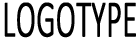
<style>
.page{position:relative;width:140px;height:40px;background:#ffffff}
.page>*{position:absolute;margin:0}
.t1{font:52.5px "Calibri-Light";color:#000000;font-weight:bold;scale:0.57 1}
</style>
<div class="page">
<p class="t1" style="left:4px;top:2px;width:132px;height:36px">LOGOTYPE</p>
</div>
